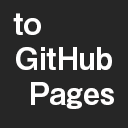
<style>
.page{position:relative;width:128px;height:128px;background:#262626}
.page>*{position:absolute;margin:0}
.t1{font:30px "MidashiGoPr6N-MB31";color:#fffefe}
</style>
<div class="page">
<p class="t1" style="left:13px;top:13px;width:28px;height:22px">to</p>
<p class="t1" style="left:16px;top:47px;width:96px;height:23px">GitHub</p>
<p class="t1" style="left:31px;top:82px;width:83px;height:27px">Pages</p>
</div>
